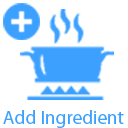
<style>
.page{position:relative;width:128px;height:128px;background:#ffffff}
.page>*{position:absolute;margin:0}
.t1{font:19.2px "MyriadPro-Regular";color:#3ca0ff}
</style>
<div class="page">
<p class="t1" style="left:3px;top:110px;width:121px;height:18px">Add Ingredient</p>
</div>
